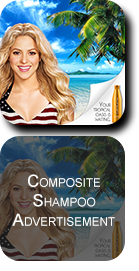
<style>
.page{position:relative;width:139px;height:271px}
.page>*{position:absolute;margin:0}
.t1{font:16.7px/19.4px "ArialMT";color:#ffffff;font-variant:small-caps}
</style>
<div class="page">
<p class="t1" style="left:12px;top:174px;width:103px;height:52px;text-align:center">Composite Shampoo Advertisement</p>
</div>
